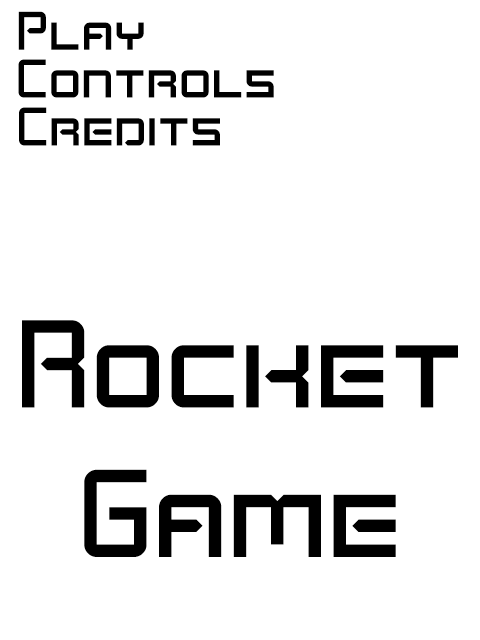
<style>
.page{position:relative;width:480px;height:640px;background:#ffffff}
.page>*{position:absolute;margin:0}
.t1{font:27.2px "Kenney-Space";color:#000000}
.t2{font:62.3px "Kenney-Space";color:#000000}
</style>
<div class="page">
<p class="t1" style="left:18px;top:11px;width:126px;height:39px">Play</p>
<p class="t1" style="left:18px;top:59px;width:256px;height:39px">Controls</p>
<p class="t1" style="left:19px;top:107px;width:201px;height:39px">Credits</p>
<p class="t2" style="left:22px;top:320px;width:436px;height:237px;text-align:center">Rocket<br><br>Game</p>
</div>
